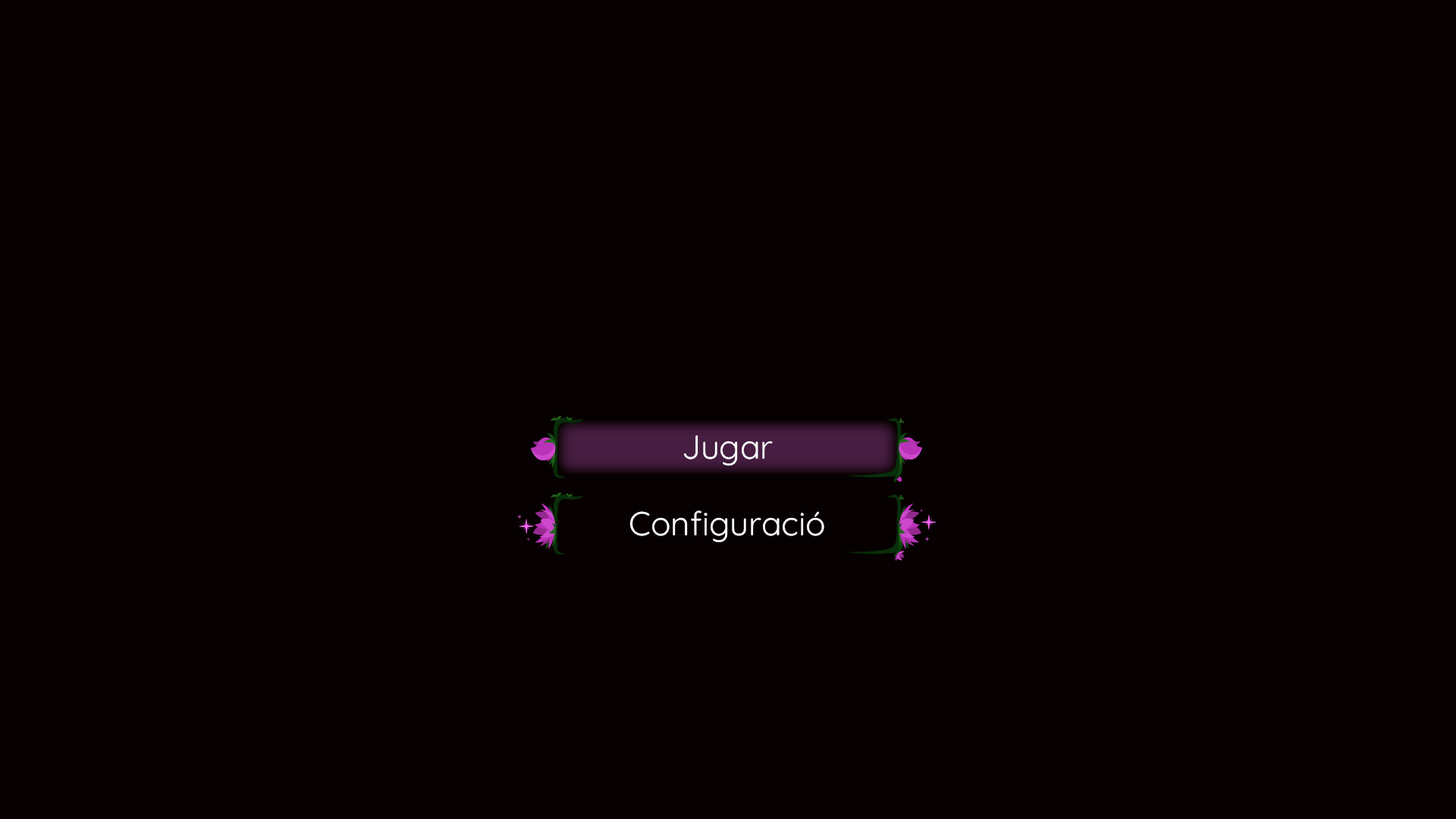
<style>
.page{position:relative;width:1456px;height:819px;background:#070000}
.page>*{position:absolute;margin:0}
.t1{font:33.4px "Quicksand-Regular";color:#ffffff}
</style>
<div class="page">
<p class="t1" style="left:683px;top:435px;width:90px;height:31px">Jugar</p>
<p class="t1" style="left:629px;top:510px;width:195px;height:32px">Configuració</p>
</div>
